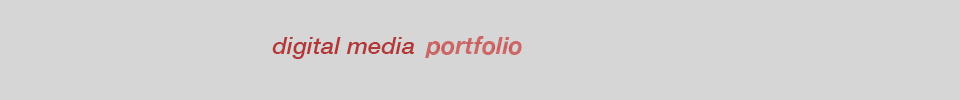
<style>
.page{position:relative;width:960px;height:100px;background:#d6d6d6}
.page>*{position:absolute;margin:0}
.t1{font:24px "HelveticaNeue-MediumItalic";color:#b43737}
</style>
<div class="page">
<p class="t1" style="left:272px;top:37px;width:142px;height:22px">digital media</p>
</div>
